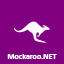
<style>
.page{position:relative;width:64px;height:64px;background:#800080}
.page>*{position:absolute;margin:0}
.t1{font:8px "Calibri-Bold";color:#ffffff}
</style>
<div class="page">
<p class="t1" style="left:7px;top:54px;width:50px;height:5px">Mockaroo.NET</p>
</div>
